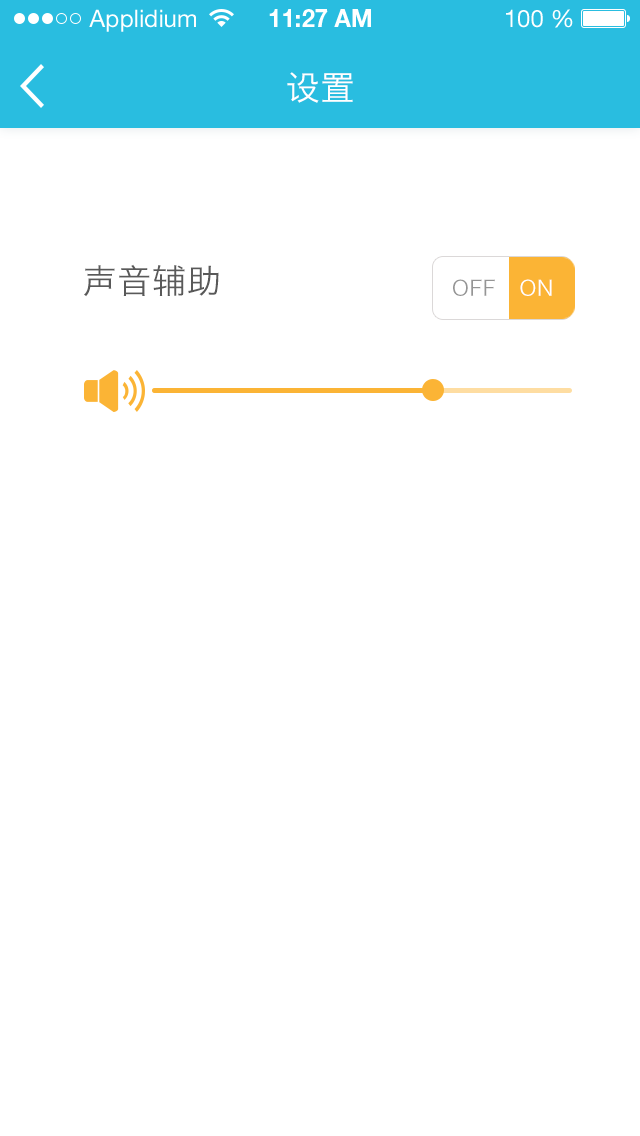
<style>
.page{position:relative;width:640px;height:1136px;background:#ffffff}
.page>*{position:absolute;margin:0}
.t1{font:34px "HiraginoSansGB-W3";letter-spacing:0.025em;color:#ffffff}
.t2{font:34px "HiraginoSansGB-W3";letter-spacing:0.025em;color:#595959}
.t3{font:21.1px "HiraginoSansGB-W3";letter-spacing:0.025em;color:#959595}
.t4{font:21.1px "HiraginoSansGB-W3";letter-spacing:0.025em;color:#ffffff}
</style>
<div class="page">
<p class="t1" style="left:287px;top:72px;width:66px;height:31px">设置</p>
<p class="t2" style="left:84px;top:264px;width:135px;height:33px">声音辅助</p>
<p class="t3" style="left:453px;top:279px;width:42px;height:17px">OFF</p>
<p class="t4" style="left:520px;top:279px;width:32px;height:17px">ON</p>
</div>
